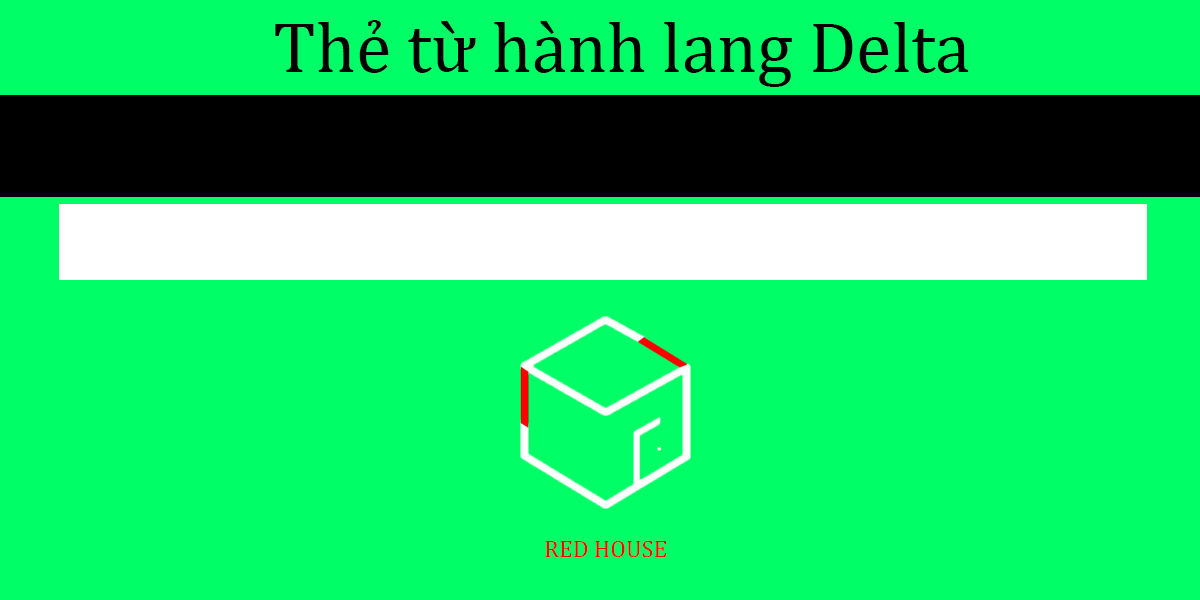
<style>
.page{position:relative;width:1200px;height:600px;background:#00ff66}
.page>*{position:absolute;margin:0}
.t1{font:72px "Cambria";color:#000000}
.t2{font:24px "Cambria";color:#ff0000}
</style>
<div class="page">
<p class="t1" style="left:275px;top:20px;width:694px;height:67px">Thẻ từ hành lang Delta</p>
<p class="t2" style="left:545px;top:540px;width:122px;height:18px">RED HOUSE</p>
</div>
